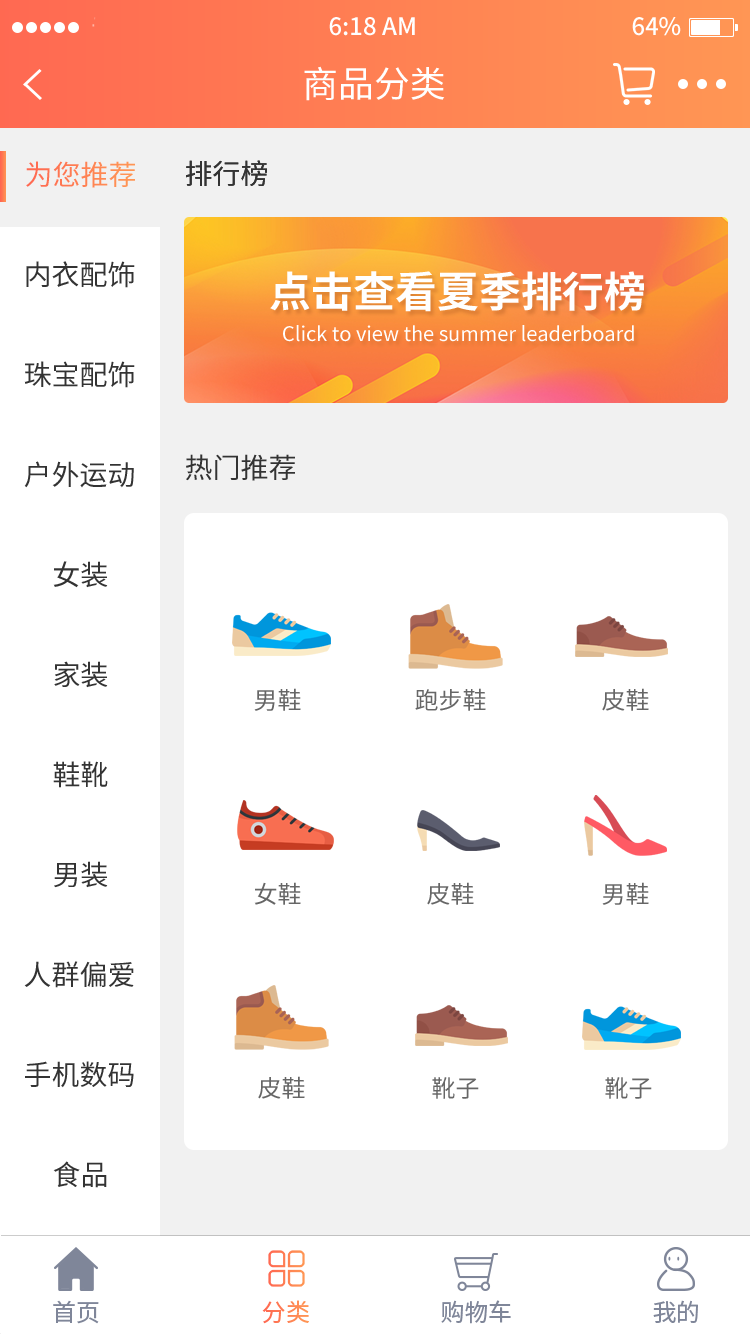
<style>
.page{position:relative;width:750px;height:1334px;background:#ffffff}
.page>*{position:absolute;margin:0}
.t1{font:36px "NotoSansHans-Regular";color:#ffffff}
.t2{font:28px "NotoSansHans-Regular";color:#ff8253}
.t3{font:28px "NotoSansHans-Regular";color:#333333}
.t4{font:41.9px "NotoSansHans-Bold";color:#ffffff}
.t5{font:20px "NotoSansHans-Regular";color:#ffffff}
.t6{font:24px "NotoSansHans-Regular";color:#666666}
.t7{font:24px "NotoSansHans-Regular";color:#7f8699}
.t8{font:24px "NotoSansHans-Regular";color:#ff8553}
</style>
<div class="page">
<p class="t1" style="left:304px;top:66px;width:141px;height:35px">商品分类</p>
<p class="t2" style="left:26px;top:161px;width:109px;height:27px">为您推荐</p>
<p class="t3" style="left:186px;top:160px;width:81px;height:26px">排行榜</p>
<p class="t3" style="left:186px;top:160px;width:81px;height:26px">排行榜</p>
<p class="t3" style="left:26px;top:261px;width:109px;height:27px">内衣配饰</p>
<p class="t4" style="left:270px;top:271px;width:374px;height:41px">点击查看夏季排行榜</p>
<p class="t5" style="left:283px;top:325px;width:351px;height:17px">Click to view the summer leaderboard</p>
<p class="t3" style="left:24px;top:361px;width:111px;height:27px">珠宝配饰</p>
<p class="t3" style="left:24px;top:461px;width:110px;height:27px">户外运动</p>
<p class="t3" style="left:186px;top:454px;width:109px;height:27px">热门推荐</p>
<p class="t3" style="left:53px;top:561px;width:55px;height:27px">女装</p>
<p class="t3" style="left:54px;top:661px;width:54px;height:27px">家装</p>
<p class="t6" style="left:254px;top:688px;width:47px;height:23px">男鞋</p>
<p class="t6" style="left:415px;top:688px;width:71px;height:23px">跑步鞋</p>
<p class="t6" style="left:602px;top:688px;width:47px;height:23px">皮鞋</p>
<p class="t3" style="left:53px;top:761px;width:55px;height:27px">鞋靴</p>
<p class="t3" style="left:54px;top:861px;width:54px;height:27px">男装</p>
<p class="t6" style="left:254px;top:882px;width:47px;height:23px">女鞋</p>
<p class="t6" style="left:427px;top:882px;width:47px;height:23px">皮鞋</p>
<p class="t6" style="left:602px;top:882px;width:47px;height:23px">男鞋</p>
<p class="t3" style="left:24px;top:961px;width:110px;height:27px">人群偏爱</p>
<p class="t3" style="left:25px;top:1061px;width:109px;height:27px">手机数码</p>
<p class="t6" style="left:258px;top:1076px;width:47px;height:23px">皮鞋</p>
<p class="t6" style="left:432px;top:1077px;width:47px;height:22px">靴子</p>
<p class="t6" style="left:605px;top:1077px;width:47px;height:22px">靴子</p>
<p class="t3" style="left:53px;top:1161px;width:54px;height:27px">食品</p>
<p class="t7" style="left:53px;top:1300px;width:46px;height:24px">首页</p>
<p class="t8" style="left:262px;top:1300px;width:47px;height:24px">分类</p>
<p class="t7" style="left:441px;top:1300px;width:70px;height:24px">购物车</p>
<p class="t7" style="left:653px;top:1300px;width:45px;height:23px">我的</p>
</div>
